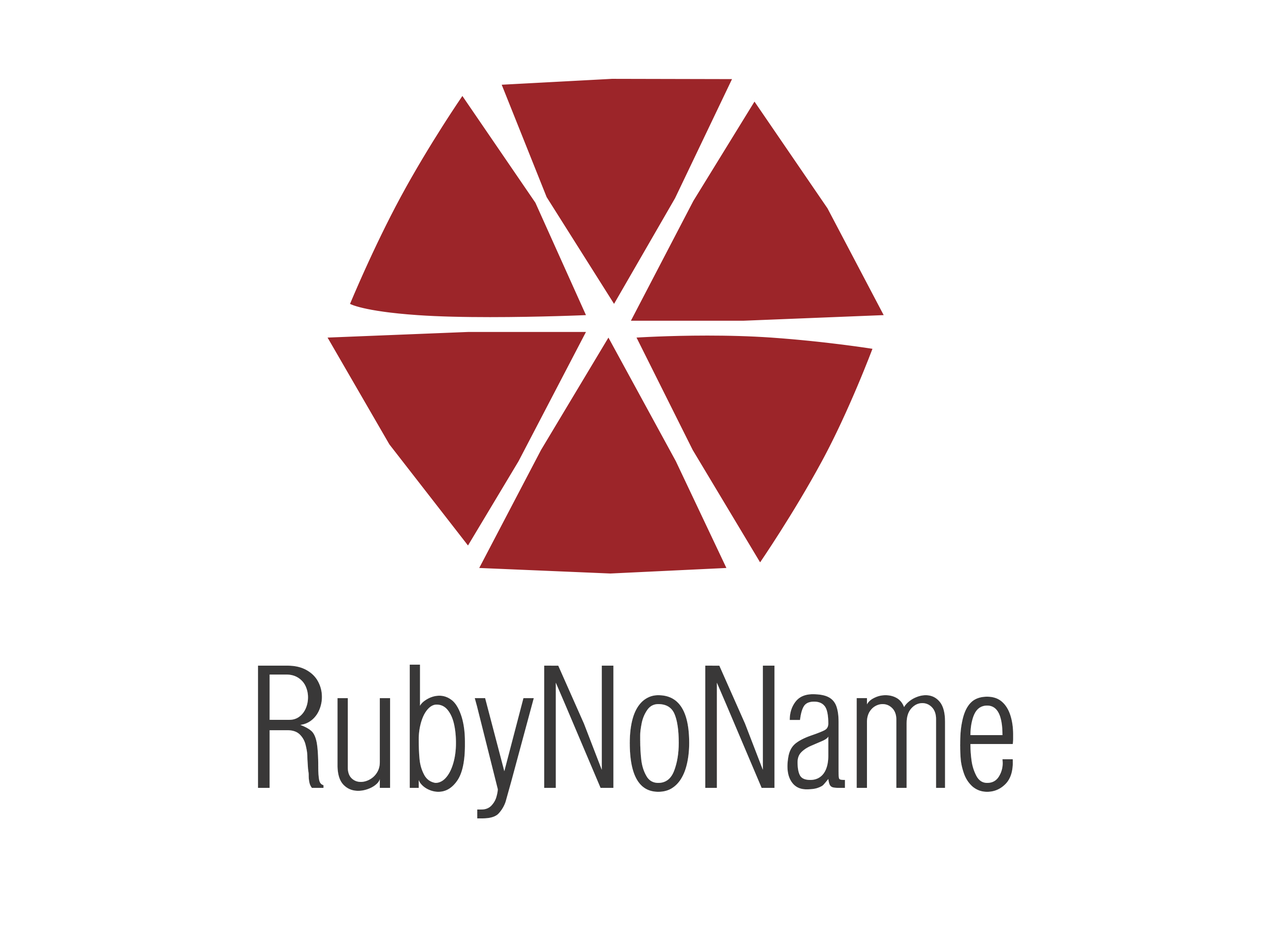
<style>
.page{position:relative;width:1261px;height:946px;background:#ffffff}
.page>*{position:absolute;margin:0}
.t1{font:162.5px "HeliosCondLight";color:#393838}
</style>
<div class="page">
<p class="t1" style="left:258px;top:664px;width:755px;height:154px">RubyNoName</p>
</div>
